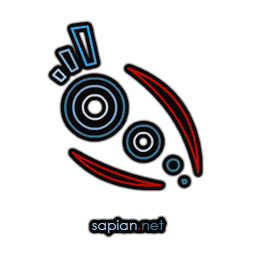
<style>
.page{position:relative;width:256px;height:256px;background:#ffffff}
.page>*{position:absolute;margin:0}
.t1{font:14px "CenturyGothic";color:#a5cff0}
.t2{font:14px "CenturyGothic";color:#bc0a04}
.t3{font:14px "CenturyGothic";color:#427a9a}
</style>
<div class="page">
<p class="t1" style="left:92px;top:220px;width:72px;height:13px">sapian<span class="t2">.</span><span class="t3">net</span></p>
</div>
